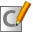
<style>
.page{position:relative;width:33px;height:33px;background:#ffffff}
.page>*{position:absolute;margin:0}
.t1{font:24px "MyriadPro-Bold";letter-spacing:0.02em;color:#7d7d7d}
</style>
<div class="page">
<p class="t1" style="left:3px;top:10px;width:13px;height:17px">C</p>
</div>
